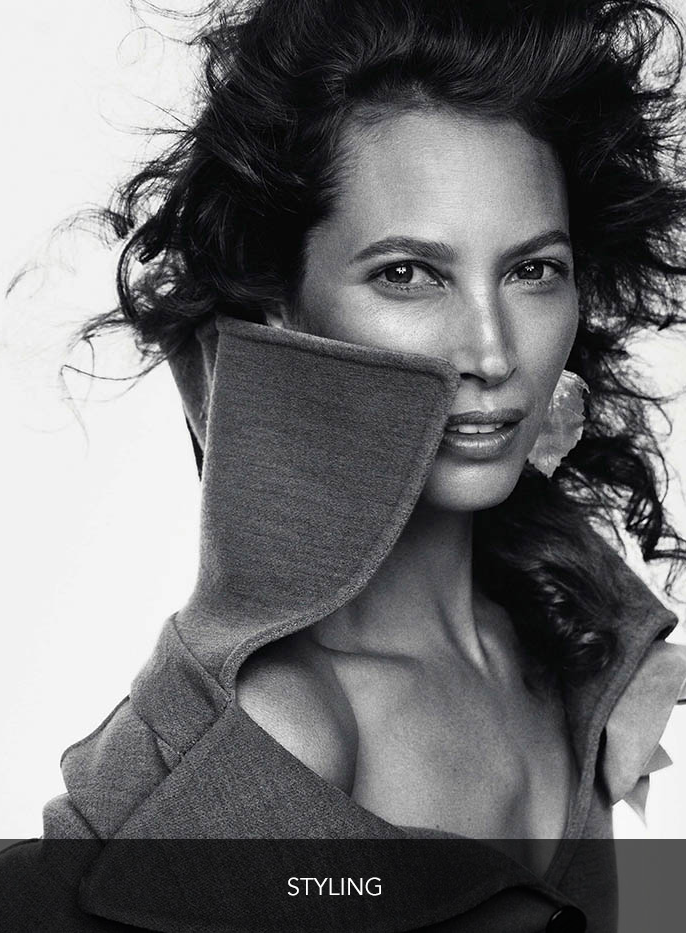
<style>
.page{position:relative;width:686px;height:933px}
.page>*{position:absolute;margin:0}
.t1{font:24px "Avenir-Book";color:#ffffff;text-transform:uppercase}
</style>
<div class="page">
<p class="t1" style="left:287px;top:877px;width:94px;height:19px">Styling</p>
</div>
